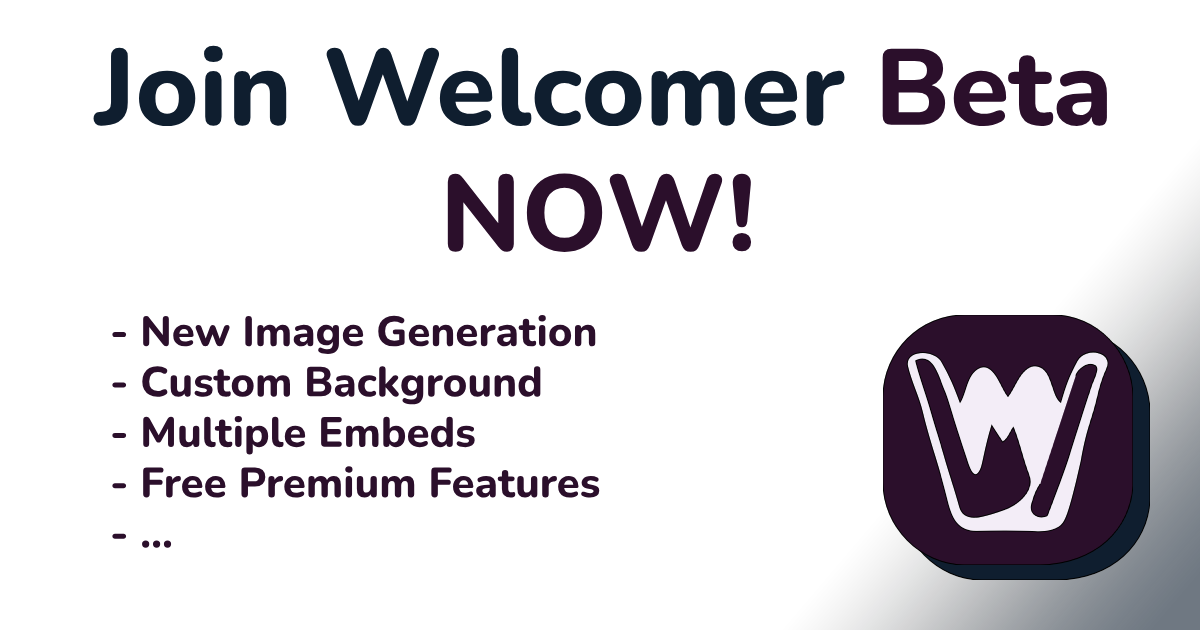
<style>
.page{position:relative;width:1200px;height:630px;background:#ffffff}
.page>*{position:absolute;margin:0}
.t1{font:108px "Nunito-ExtraBold";color:#0f1e2f}
.t2{font:108px "Nunito-ExtraBold";color:#2b0f2b}
.t3{font:42px "Nunito-ExtraBold";color:#2b0f2b}
</style>
<div class="page">
<p class="t1" style="left:93px;top:45px;width:1014px;height:81px">Join Welcomer <span class="t2">Beta</span></p>
<p class="t2" style="left:447px;top:173px;width:305px;height:79px">NOW!</p>
<p class="t3" style="left:112px;top:315px;width:488px;height:233px">- New Image Generation<br>- Custom Background <br>- Multiple Embeds<br>- Free Premium Features<br>- ...</p>
</div>
